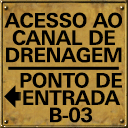
<style>
.page{position:relative;width:128px;height:128px;background:#000000}
.page>*{position:absolute;margin:0}
.t1{font:20px/17.3px "UniversNextPro-Bold";letter-spacing:-0.02em;color:#000000;text-transform:uppercase}
</style>
<div class="page">
<p class="t1" style="left:4px;top:12px;width:118px;height:51px;text-align:center">Acesso ao<br>canal de<br>drenagem</p>
<p class="t1" style="left:20px;top:72px;width:102px;height:51px;text-align:center">ponto de<br>entrada<br>b-03</p>
</div>
